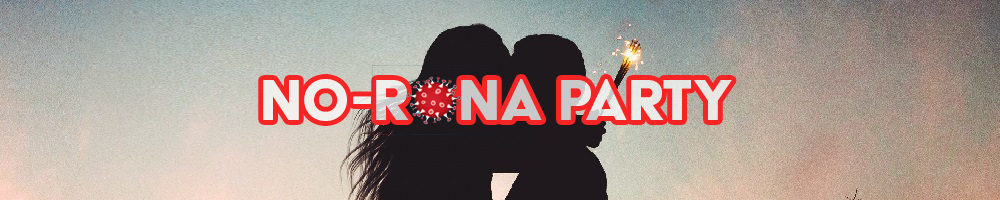
<style>
.page{position:relative;width:1000px;height:200px}
.page>*{position:absolute;margin:0}
.t1{font:66px "AcierBATText-Solid"}
</style>
<div class="page">
<p class="t1" style="left:263px;top:79px;width:469px;height:42px">No-rona party</p>
</div>
